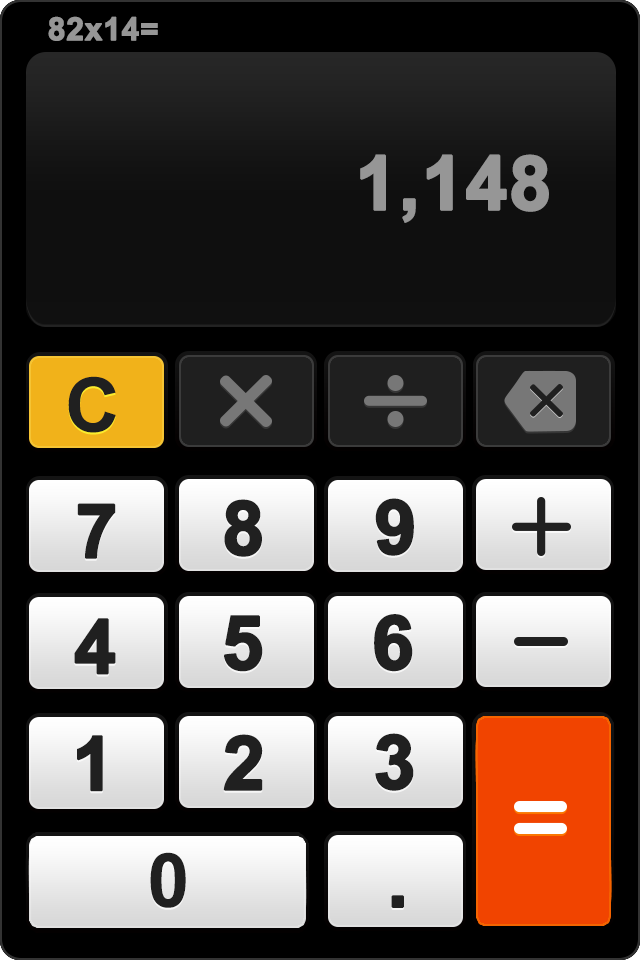
<style>
.page{position:relative;width:640px;height:960px;background:#000000}
.page>*{position:absolute;margin:0}
.t1{font:31.7px "Arial-BoldMT";color:#969696;font-weight:bold}
.t2{font:75px "Arial-BoldMT";color:#969696;font-weight:bold}
.t3{font:75px "Arial-BoldMT";color:#202020}
.t4{font:75px "Arial-BoldMT";color:#202020;font-weight:bold}
</style>
<div class="page">
<p class="t1" style="left:48px;top:16px;width:110px;height:25px">82x14=</p>
<p class="t2" style="left:360px;top:154px;width:189px;height:69px">1,148</p>
<p class="t3" style="left:68px;top:376px;width:48px;height:57px">C</p>
<p class="t4" style="left:77px;top:503px;width:39px;height:56px">7</p>
<p class="t4" style="left:224px;top:499px;width:38px;height:58px">8</p>
<p class="t4" style="left:375px;top:498px;width:39px;height:58px">9</p>
<p class="t4" style="left:224px;top:615px;width:39px;height:57px">5</p>
<p class="t4" style="left:374px;top:614px;width:39px;height:58px">6</p>
<p class="t4" style="left:74px;top:618px;width:42px;height:57px">4</p>
<p class="t4" style="left:77px;top:735px;width:26px;height:57px">1</p>
<p class="t4" style="left:223px;top:734px;width:40px;height:57px">2</p>
<p class="t4" style="left:375px;top:733px;width:39px;height:58px">3</p>
<p class="t3" style="left:150px;top:852px;width:36px;height:56px">0</p>
<p class="t4" style="left:391px;top:895px;width:13px;height:13px">.</p>
</div>
